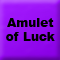
<style>
.page{position:relative;width:60px;height:60px}
.page>*{position:absolute;margin:0}
.t1{font:12px "Arial-Black";color:#000000}
</style>
<div class="page">
<p class="t1" style="left:6px;top:18px;width:49px;height:23px;text-align:center">Amulet<br>of Luck</p>
</div>
